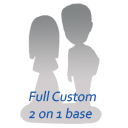
<style>
.page{position:relative;width:128px;height:128px;background:#ffffff}
.page>*{position:absolute;margin:0}
.t1{font:14px/17px "Corbel";color:#1956aa;font-style:italic}
</style>
<div class="page">
<p class="t1" style="left:29px;top:90px;width:68px;height:29px">Full Custom<br>2 on 1 base</p>
</div>
